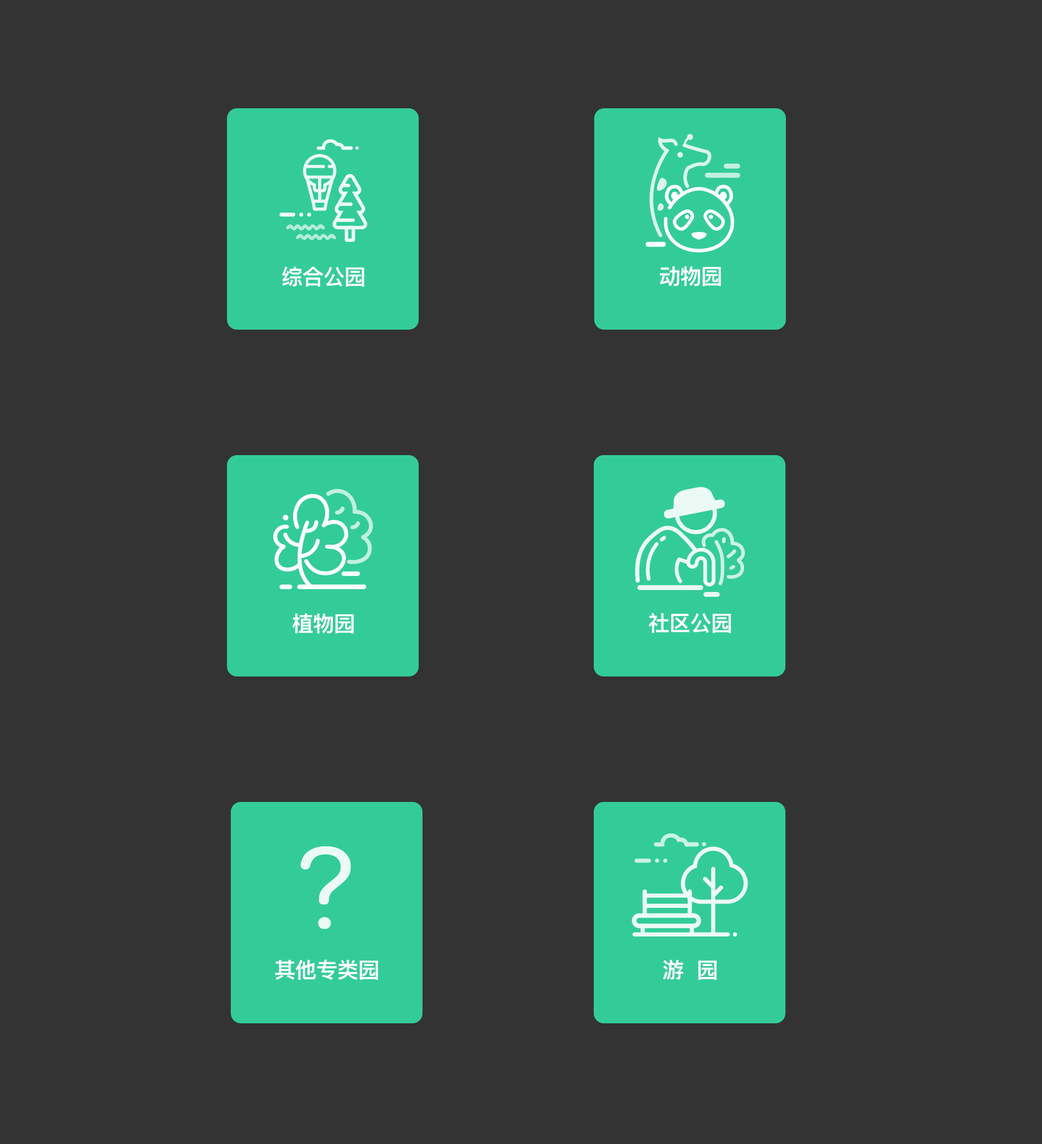
<style>
.page{position:relative;width:1042px;height:1144px;background:#333333}
.page>*{position:absolute;margin:0}
.t1{font:21.5px "PingFangSC-Semibold";letter-spacing:-0.025em;color:#ffffff;text-transform:uppercase}
</style>
<div class="page">
<p class="t1" style="left:282px;top:266px;width:82px;height:21px">综合公园</p>
<p class="t1" style="left:660px;top:266px;width:61px;height:20px">动物园</p>
<p class="t1" style="left:292px;top:613px;width:62px;height:21px">植物园</p>
<p class="t1" style="left:649px;top:613px;width:82px;height:20px">社区公园</p>
<p class="t1" style="left:275px;top:959px;width:103px;height:21px">其他专类园</p>
<p class="t1" style="left:663px;top:959px;width:54px;height:21px">游  园</p>
</div>
